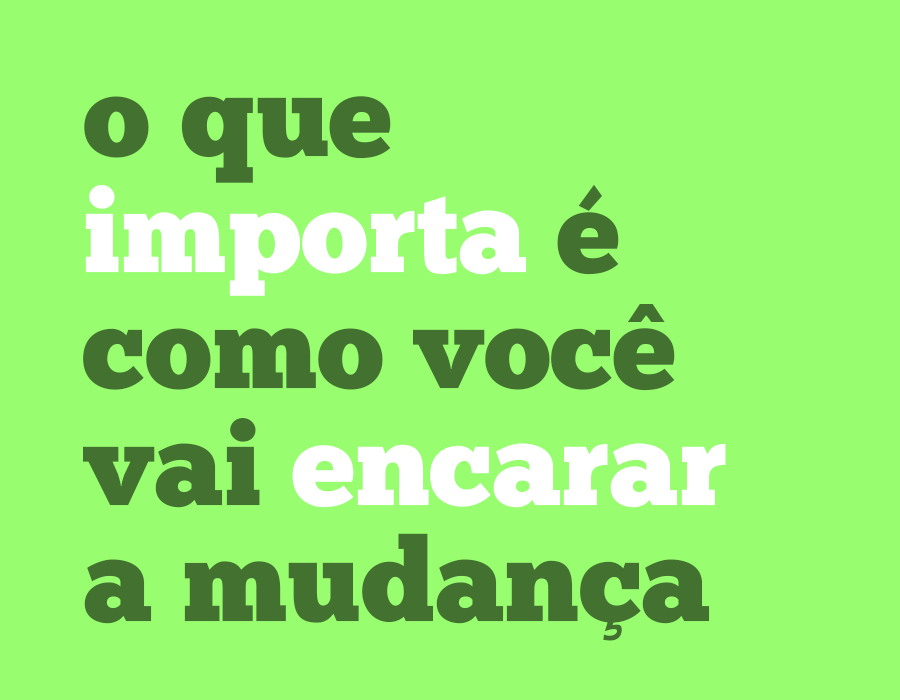
<style>
.page{position:relative;width:900px;height:700px;background:#98fd6f}
.page>*{position:absolute;margin:0}
.t1{font:116.3px/116.3px "ChunkFive-Roman";color:#437230}
.t2{font:116.3px/116.3px "ChunkFive-Roman";color:#ffffff}
.t3{font:84.9px "GothamUltra";color:#437230}
</style>
<div class="page">
<p class="t1" style="left:83px;top:96px;width:643px;height:545px">o que<br><span class="t2">importa </span>é<br>como voce<br>vai <span class="t2">encarar<br></span>a mudança</p>
<p class="t3" style="left:628px;top:304px;width:37px;height:18px">^</p>
</div>
